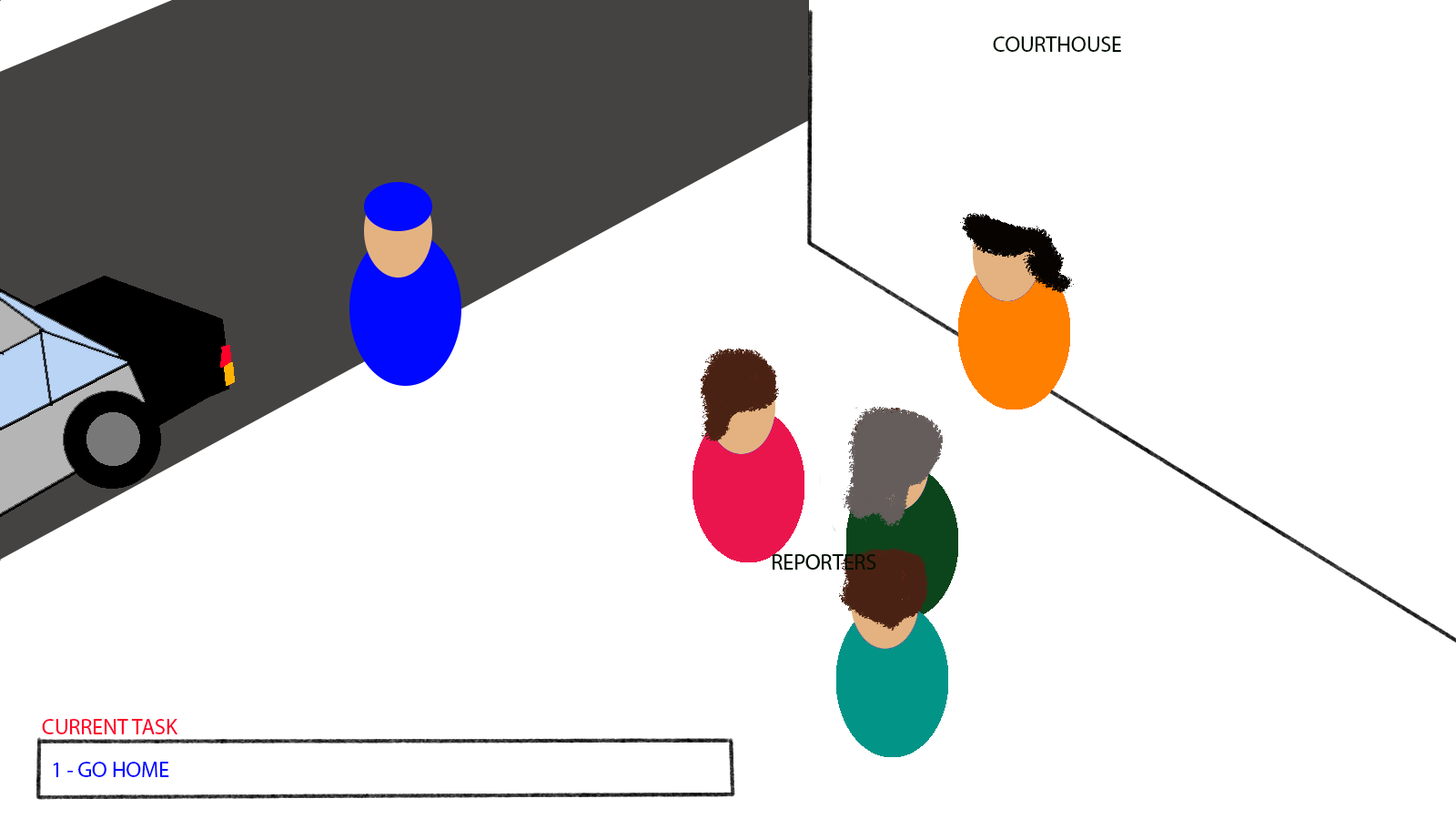
<style>
.page{position:relative;width:1456px;height:819px;background:#ffffff}
.page>*{position:absolute;margin:0}
.t1{font:21.8px "MyriadPro-Regular";color:#011102}
.t2{font:21.8px "MyriadPro-Regular";color:#ff002a}
.t3{font:21.8px "MyriadPro-Regular";color:#0008ff}
</style>
<div class="page">
<p class="t1" style="left:993px;top:36px;width:128px;height:16px">COURTHOUSE</p>
<p class="t2" style="left:42px;top:719px;width:136px;height:15px">CURRENT TASK</p>
<p class="t3" style="left:53px;top:762px;width:116px;height:15px">1 - GO HOME</p>
</div>
